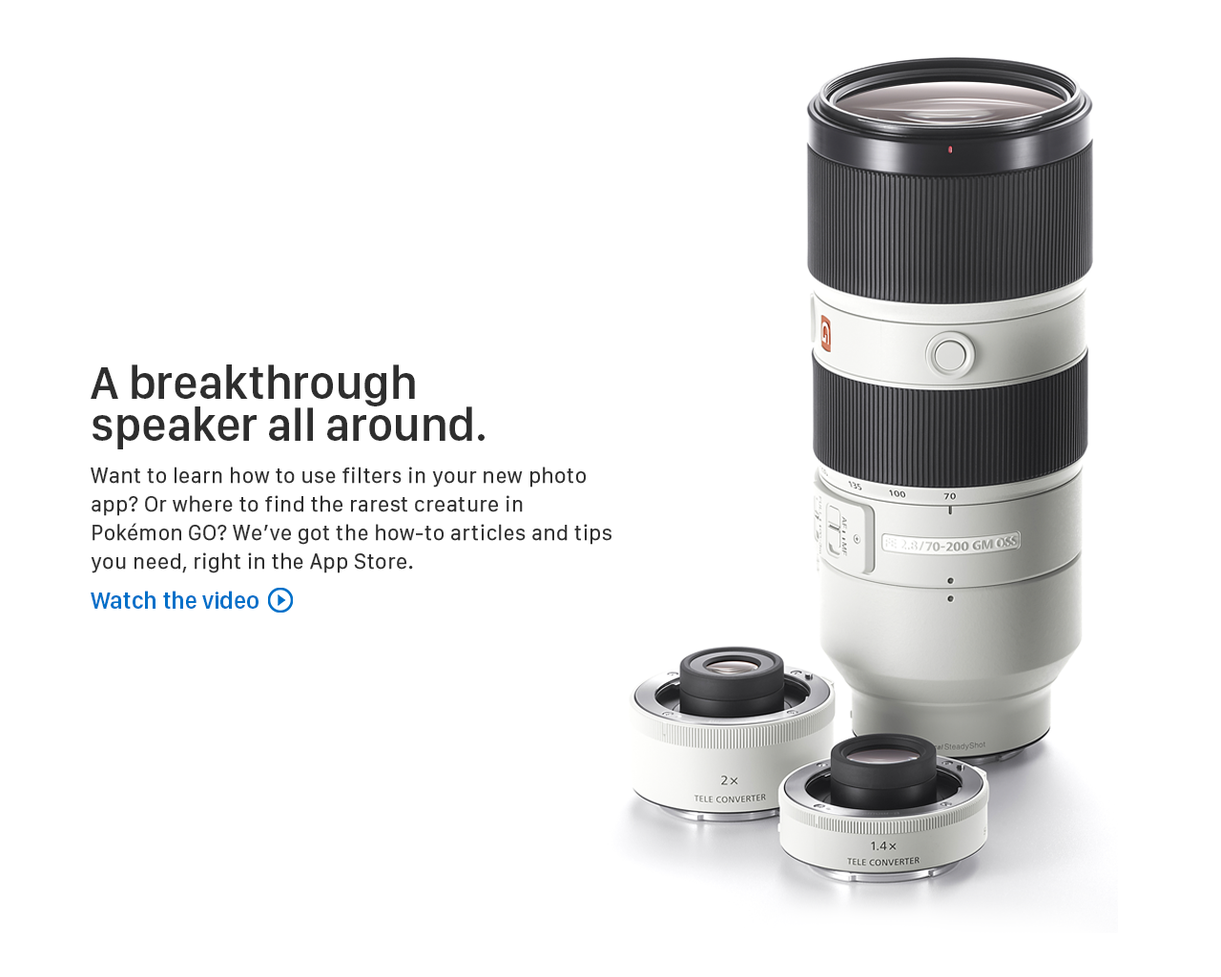
<style>
.page{position:relative;width:1221px;height:977px;background:#ffffff}
.page>*{position:absolute;margin:0}
.t1{font:47.1px/42.1px "SanFranciscoDisplay-Semibold";color:#2e2e2e}
.t2{font:21.5px/28.6px "SanFranciscoText-Regular";color:#2e2e2e;font-weight:bold}
.t3{font:23.8px "SanFranciscoDisplay-Semibold";color:#0070c9}
</style>
<div class="page">
<p class="t1" style="left:91px;top:364px;width:394px;height:85px">A breakthrough <br>speaker all around.</p>
<p class="t2" style="left:91px;top:466px;width:520px;height:107px">Want to learn how to use filters in your new photo app? Or where to find the rarest creature in Pokémon GO? We’ve got the how-to articles and tips you need, right in the App Store.</p>
<p class="t3" style="left:91px;top:590px;width:167px;height:19px">Watch the video</p>
</div>
